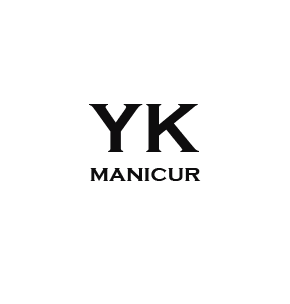
<style>
.page{position:relative;width:290px;height:304px;background:#ffffff}
.page>*{position:absolute;margin:0}
.t1{font:24px "CopperplateGothic-Bold";color:#0e0d0e}
.t2{font:72px "CopperplateGothic-Bold";color:#0e0d0e}
</style>
<div class="page">
<p class="t1" style="left:89px;top:104px;width:112px;height:77px;text-align:center"><span class="t2">YK<br></span>manicur</p>
</div>
